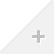
<style>
.page{position:relative;width:54px;height:54px;background:#f1f1f1}
.page>*{position:absolute;margin:0}
.t1{font:25.1px "Arial-BoldMT";color:#c1c0c0}
</style>
<div class="page">
<p class="t1" style="left:32px;top:30px;width:13px;height:13px">+</p>
</div>
